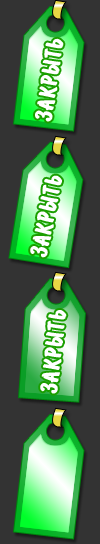
<style>
.page{position:relative;width:100px;height:544px;background:#333333}
.page>*{position:absolute;margin:0}
.t1{font:26.4px "BrushType-Bold";letter-spacing:0.05em;color:#ffffff;font-weight:bold;scale:0.86 1}
</style>
<div class="page">
<p class="t1" style="left:35px;top:38px;width:29px;height:84px;rotate:-82deg">ÇÀÊÐÛÒÜ</p>
<p class="t1" style="left:30px;top:175px;width:32px;height:83px;rotate:-79deg">ÇÀÊÐÛÒÜ</p>
<p class="t1" style="left:40px;top:310px;width:27px;height:84px;rotate:-84deg">ÇÀÊÐÛÒÜ</p>
</div>
